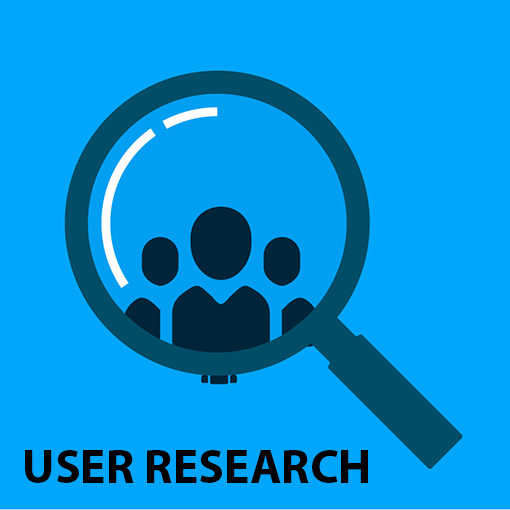
<style>
.page{position:relative;width:510px;height:510px;background:#00a6fc}
.page>*{position:absolute;margin:0}
.t1{font:48px "MyriadPro-Bold";color:#000000}
</style>
<div class="page">
<p class="t1" style="left:25px;top:450px;width:343px;height:33px">USER RESEARCH</p>
</div>
